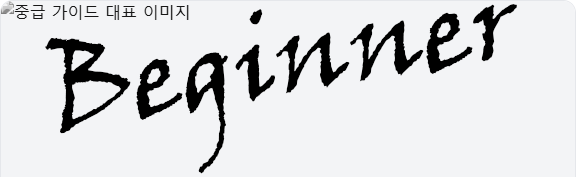
<style>
.page{position:relative;width:576px;height:177px;background:#f3f4f6}
.page>*{position:absolute;margin:0}
.t1{font:113.7px "VinerHandITC";color:#000000}
</style>
<div class="page">
<p class="t1" style="left:45px;top:4px;width:472px;height:170px;rotate:-9deg">Beginner</p>
</div>
